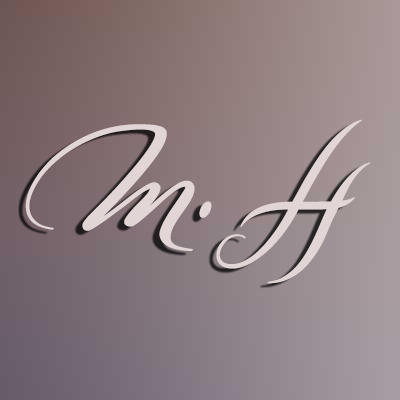
<style>
.page{position:relative;width:400px;height:400px}
.page>*{position:absolute;margin:0}
.t1{font:120px "CasablancaNoirPersonalUse-Regul";color:#ccc7c7}
</style>
<div class="page">
<p class="t1" style="left:25px;top:119px;width:345px;height:165px">M.H</p>
</div>
